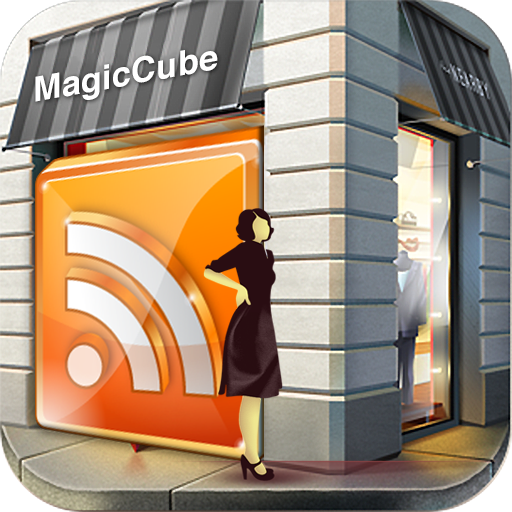
<style>
.page{position:relative;width:512px;height:512px}
.page>*{position:absolute;margin:0}
.t1{font:34.6px "Helvetica-Bold";letter-spacing:0.01em;color:#ffffff}
</style>
<div class="page">
<p class="t1" style="left:35px;top:50px;width:183px;height:52px;rotate:-10deg">MagicCube</p>
</div>
